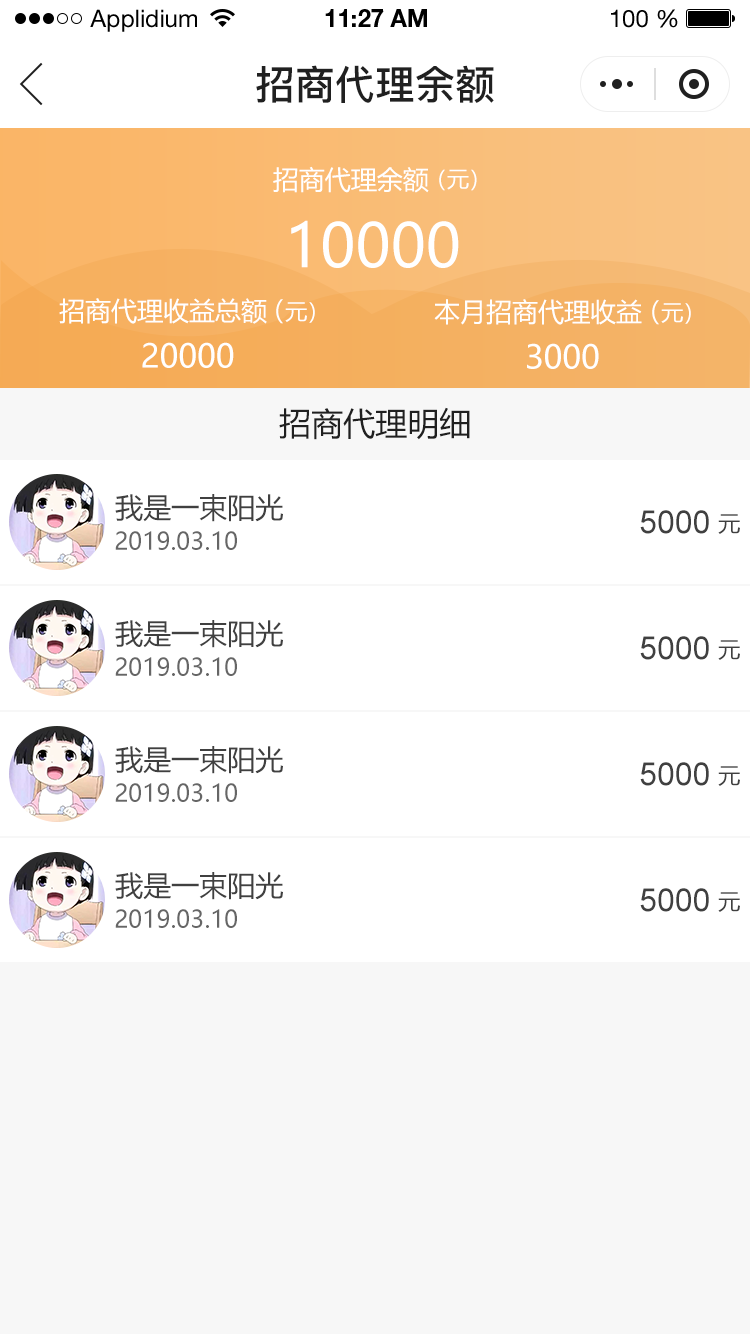
<style>
.page{position:relative;width:750px;height:1334px;background:#ffffff}
.page>*{position:absolute;margin:0}
.t1{font:24px "HelveticaNeueLTStd-Roman";color:#000000}
.t2{font:24px "HelveticaNeueLTStd-Bd";color:#000000}
.t3{font:40px "PingFang-SC-Bold";color:#202020;text-transform:uppercase}
.t4{font:26px "MicrosoftYaHei";color:#ffffff;text-transform:uppercase}
.t5{font:22px "MicrosoftYaHei";color:#ffffff;text-transform:uppercase}
.t6{font:60px "MicrosoftYaHei";color:#ffffff;text-transform:uppercase}
.t7{font:32px "MicrosoftYaHei";color:#ffffff;text-transform:uppercase}
.t8{font:32px "MicrosoftYaHei";color:#202020;text-transform:uppercase}
.t9{font:28px "MicrosoftYaHei";color:#404040;text-transform:uppercase}
.t10{font:32px "ArialMT";color:#404040;text-transform:uppercase}
.t11{font:22px "MicrosoftYaHei";color:#404040;text-transform:uppercase}
.t12{font:24px "MicrosoftYaHei";color:#666666;text-transform:uppercase}
</style>
<div class="page">
<p class="t1" style="left:90px;top:9px;width:107px;height:23px">Applidium</p>
<p class="t2" style="left:325px;top:9px;width:102px;height:18px">11:27 AM</p>
<p class="t1" style="left:611px;top:9px;width:67px;height:19px">100 %</p>
<p class="t3" style="left:256px;top:65px;width:238px;height:38px">招商代理余额</p>
<p class="t4" style="left:273px;top:166px;width:156px;height:27px">招商代理余额</p>
<p class="t5" style="left:439px;top:169px;width:38px;height:22px">（元）</p>
<p class="t6" style="left:291px;top:220px;width:168px;height:48px">10000</p>
<p class="t4" style="left:59px;top:298px;width:208px;height:26px">招商代理收益总额</p>
<p class="t5" style="left:276px;top:299px;width:39px;height:25px"><span class="t4">（</span>元）</p>
<p class="t4" style="left:434px;top:299px;width:208px;height:26px">本月招商代理收益</p>
<p class="t5" style="left:652px;top:300px;width:39px;height:25px"><span class="t4">（</span>元）</p>
<p class="t7" style="left:142px;top:342px;width:92px;height:26px">20000</p>
<p class="t7" style="left:527px;top:343px;width:72px;height:26px">3000</p>
<p class="t8" style="left:279px;top:407px;width:191px;height:33px">招商代理明细</p>
<p class="t9" style="left:115px;top:494px;width:168px;height:28px">我是一束阳光</p>
<p class="t10" style="left:640px;top:510px;width:69px;height:24px">5000</p>
<p class="t11" style="left:718px;top:514px;width:22px;height:20px">元</p>
<p class="t12" style="left:115px;top:531px;width:122px;height:19px">2019.03.10</p>
<p class="t9" style="left:115px;top:620px;width:168px;height:28px">我是一束阳光</p>
<p class="t10" style="left:640px;top:636px;width:69px;height:24px">5000</p>
<p class="t11" style="left:718px;top:640px;width:22px;height:20px">元</p>
<p class="t12" style="left:115px;top:657px;width:122px;height:19px">2019.03.10</p>
<p class="t9" style="left:115px;top:746px;width:168px;height:28px">我是一束阳光</p>
<p class="t10" style="left:640px;top:762px;width:69px;height:24px">5000</p>
<p class="t11" style="left:718px;top:766px;width:22px;height:20px">元</p>
<p class="t12" style="left:115px;top:783px;width:122px;height:19px">2019.03.10</p>
<p class="t9" style="left:115px;top:872px;width:168px;height:28px">我是一束阳光</p>
<p class="t10" style="left:640px;top:888px;width:69px;height:24px">5000</p>
<p class="t11" style="left:718px;top:892px;width:22px;height:20px">元</p>
<p class="t12" style="left:115px;top:909px;width:122px;height:19px">2019.03.10</p>
</div>
